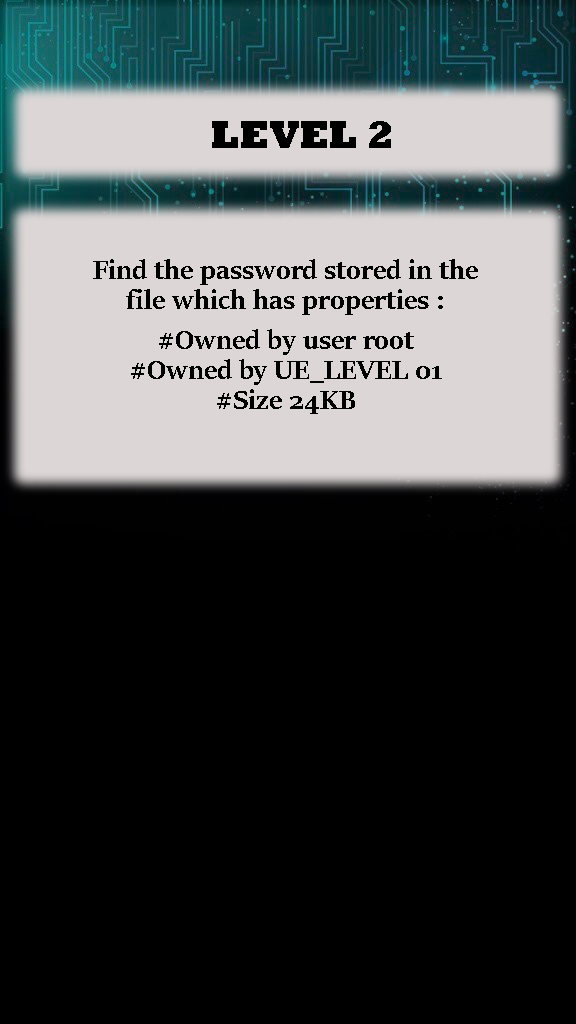
<style>
.page{position:relative;width:576px;height:1024px;background:#000000}
.page>*{position:absolute;margin:0}
.t1{font:40px "Rockwell-ExtraBold";color:#000000}
.t2{font:30px/10px "SitkaBanner-Bold";color:#000000}
</style>
<div class="page">
<p class="t1" style="left:212px;top:121px;width:179px;height:27px">LEVEL 2</p>
<p class="t2" style="left:93px;top:259px;width:385px;height:155px;text-align:center">Find the password stored in the <br><br><br>file which has properties :<br><br><br><br>#Owned by user root<br><br><br>#Owned by UE_LEVEL 01<br><br><br>#Size 24KB</p>
</div>
